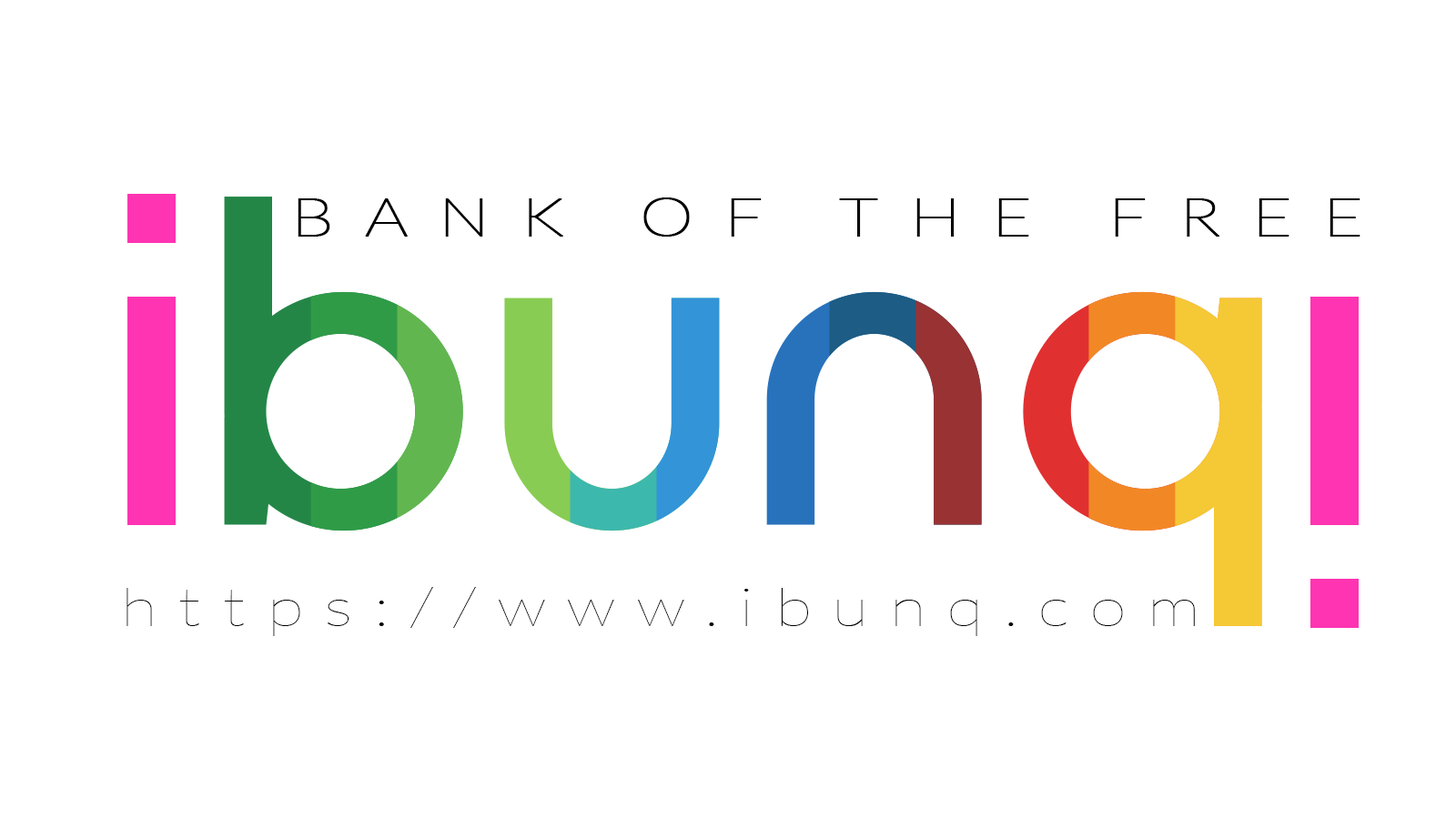
<style>
.page{position:relative;width:1456px;height:819px;background:#ffffff}
.page>*{position:absolute;margin:0}
.t1{font:53.6px "Lato-Hairline";letter-spacing:0.44em;color:#000000;text-transform:uppercase;font-weight:bold;scale:1.26 1}
.t2{font:53.6px "Lato-Hairline";letter-spacing:0.32em;color:#000000;scale:1.26 1}
</style>
<div class="page">
<p class="t1" style="left:298px;top:197px;width:1062px;height:40px">bank of the free</p>
<p class="t2" style="left:126px;top:587px;width:1069px;height:49px">https://www.ibunq.com</p>
</div>
